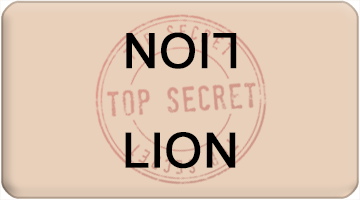
<style>
.page{position:relative;width:360px;height:200px;background:#e8d0bb}
.page>*{position:absolute;margin:0}
.t1{font:48px "ArialMT";color:#000000;font-weight:bold}
</style>
<div class="page">
<p class="t1" style="left:126px;top:32px;width:111px;height:37px;rotate:180deg">LION</p>
<p class="t1" style="left:125px;top:132px;width:111px;height:37px">LION</p>
</div>
